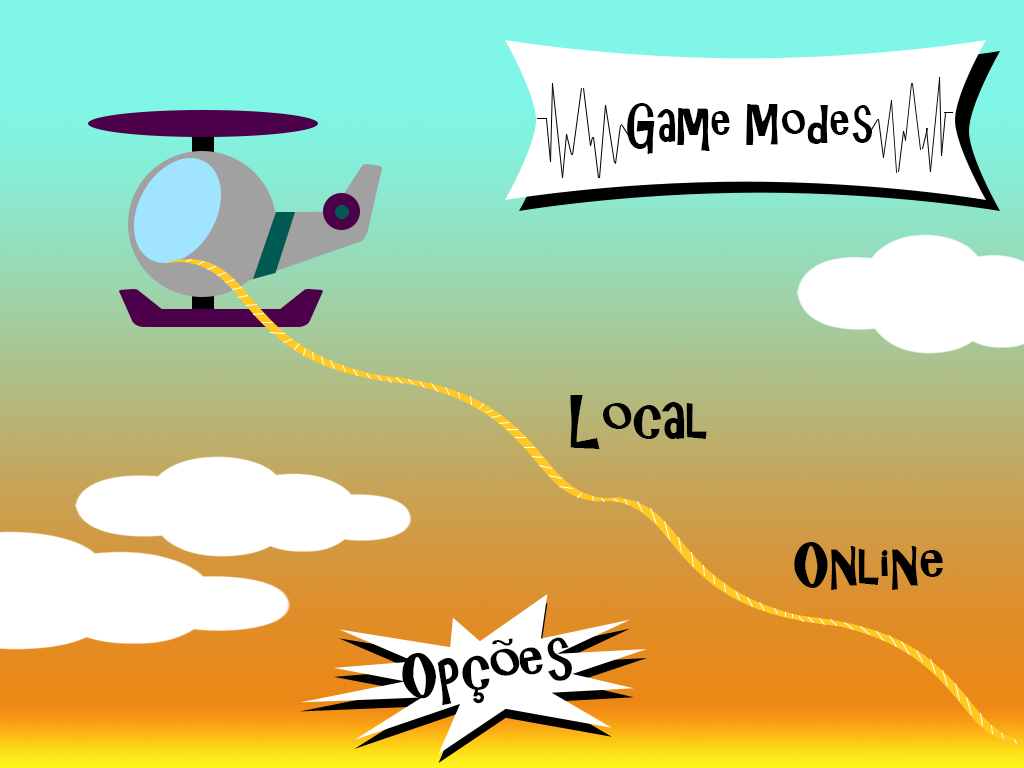
<style>
.page{position:relative;width:1024px;height:768px}
.page>*{position:absolute;margin:0}
.t1{font:52px "ARCHRISTY";color:#000000;scale:0.91 1}
.t2{font:58.3px "ARCHRISTY";color:#000000}
</style>
<div class="page">
<p class="t1" style="left:627px;top:103px;width:245px;height:51px">Game Modes</p>
<p class="t2" style="left:570px;top:395px;width:137px;height:54px">Local</p>
<p class="t2" style="left:794px;top:542px;width:150px;height:48px">Online</p>
<p class="t2" style="left:402px;top:637px;width:170px;height:69px;rotate:-7deg">Opções</p>
</div>
